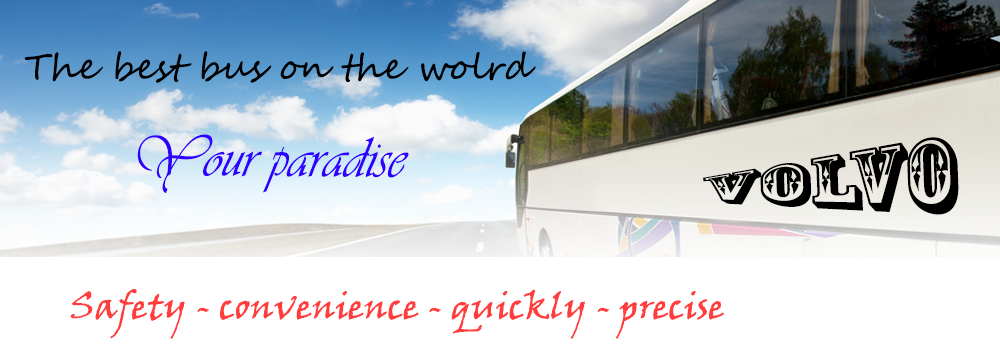
<style>
.page{position:relative;width:1000px;height:350px;background:#ffffff}
.page>*{position:absolute;margin:0}
.t1{font:36px "SegoeScript";color:#000000}
.t2{font:60px "Vivaldii";color:#3000ff;scale:0.93 1}
.t3{font:68.3px "RosewoodStd-Regular";color:#000000;scale:1.4 1}
.t4{font:36px "VinerHandITC";color:#ff3d3d}
</style>
<div class="page">
<p class="t1" style="left:24px;top:51px;width:512px;height:32px">The best bus on the wolrd</p>
<p class="t2" style="left:137px;top:134px;width:272px;height:59px">Your paradise</p>
<p class="t3" style="left:703px;top:137px;width:256px;height:78px;rotate:-3deg">volvo</p>
<p class="t4" style="left:70px;top:289px;width:654px;height:50px">Safety - convenience - quickly - precise</p>
</div>
